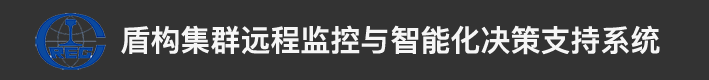
<style>
.page{position:relative;width:709px;height:80px;background:#333333}
.page>*{position:absolute;margin:0}
.t1{font:30px "PingFangSC-Semibold";color:#f6f6f6}
</style>
<div class="page">
<p class="t1" style="left:121px;top:25px;width:539px;height:30px">盾构集群远程监控与智能化决策支持系统</p>
</div>
